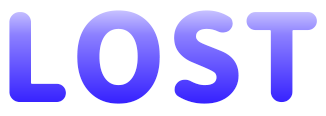
<style>
.page{position:relative;width:326px;height:116px;background:#ffffff}
.page>*{position:absolute;margin:0}
.t1{font:120.8px "Corporate-Logo-Rounded"}
</style>
<div class="page">
<p class="t1" style="left:9px;top:10px;width:308px;height:94px">LOST</p>
</div>
